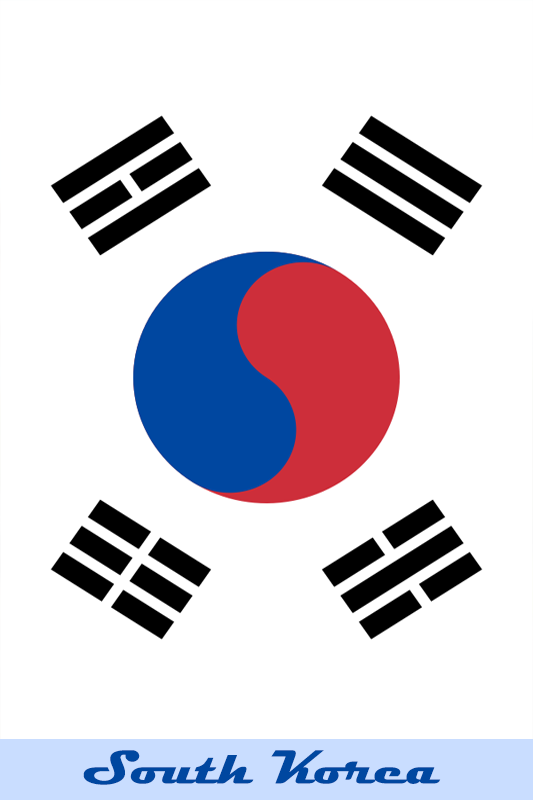
<style>
.page{position:relative;width:533px;height:800px;background:#ffffff}
.page>*{position:absolute;margin:0}
.t1{font:48px "Magneto-Bold";color:#0047a0;scale:1.08 1}
</style>
<div class="page">
<p class="t1" style="left:83px;top:750px;width:358px;height:35px">South Korea</p>
</div>
